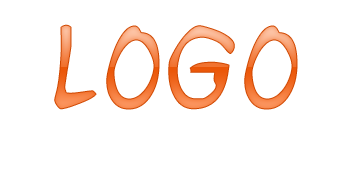
<style>
.page{position:relative;width:360px;height:180px;background:#ffffff}
.page>*{position:absolute;margin:0}
.t1{font:84px "Ynwuay";scale:0.86 1}
</style>
<div class="page">
<p class="t1" style="left:54px;top:24px;width:244px;height:86px">Logo</p>
</div>
